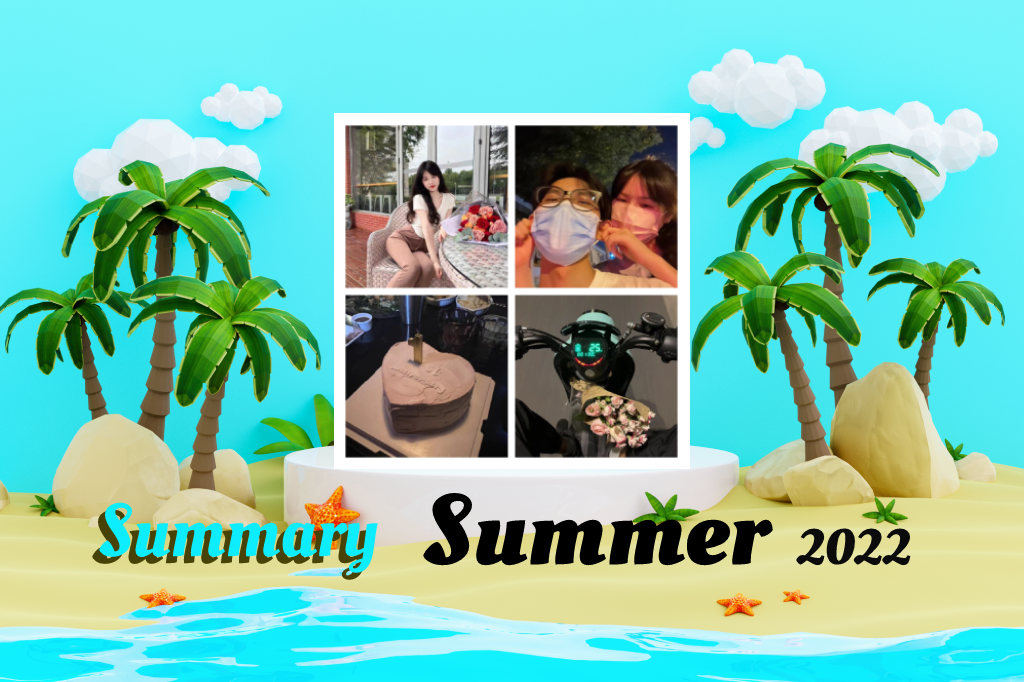
<style>
.page{position:relative;width:1024px;height:682px}
.page>*{position:absolute;margin:0}
.t1{font:100px "OleoScript-Bold";color:#000000}
.t2{font:50px "OleoScript-Bold";color:#0c0b0b}
.t3{font:75px "OleoScript-Regular"}
.t4{font:75px "OleoScript-Regular";color:#0dedfd}
</style>
<div class="page">
<p class="t1" style="left:423px;top:493px;width:488px;height:73px">Summer <span class="t2">2022</span></p>
<p class="t3" style="left:92px;top:509px;width:279px;height:71px">Summary</p>
<p class="t4" style="left:99px;top:502px;width:279px;height:71px">Summary</p>
</div>
